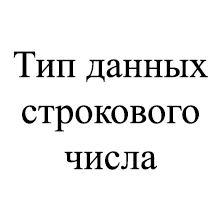
<style>
.page{position:relative;width:221px;height:221px;background:#ffffff}
.page>*{position:absolute;margin:0}
.t1{font:38.3px "TimesNewRomanPSMT";color:#000000}
</style>
<div class="page">
<p class="t1" style="left:13px;top:51px;width:195px;height:119px;text-align:center">Тип данных<br>строкового<br>числа</p>
</div>
